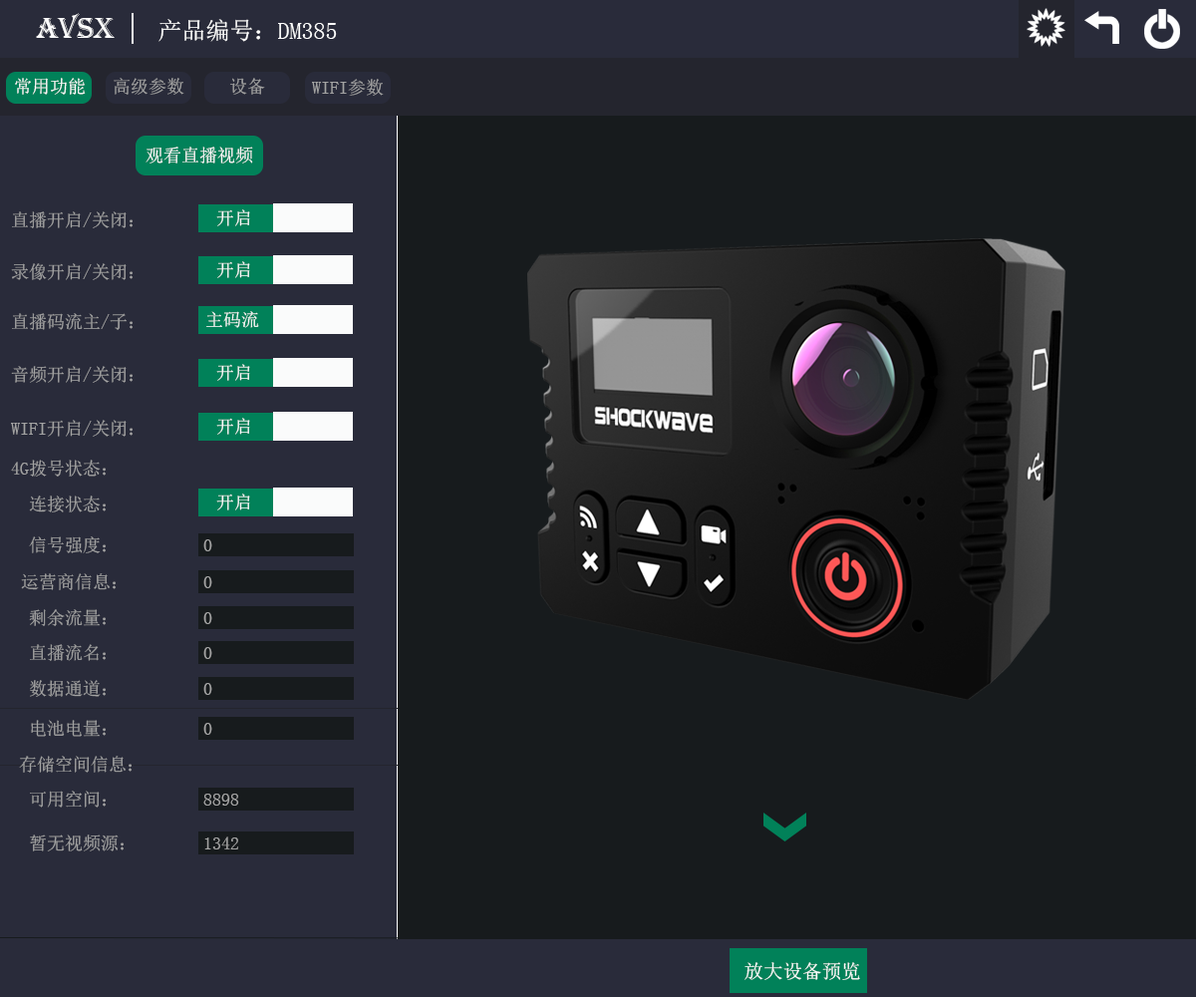
<style>
.page{position:relative;width:1196px;height:997px;background:#171b1d}
.page>*{position:absolute;margin:0}
.t1{font:29.9px "Algerian";color:#fefefe}
.t2{font:23.9px "SimSun";color:#fefefe}
.t3{font:17.9px "SimSun";color:#fffefe}
.t4{font:17.9px "SimSun";color:#a3a3a3}
.t5{font:17.9px "SimSun";color:#fcfafa}
.t6{font:17.9px "SimSun";color:#fafbfb}
.t7{font:19.2px "SimSun";color:#fdfefe}
</style>
<div class="page">
<p class="t1" style="left:36px;top:13px;width:79px;height:25px">AVSX</p>
<p class="t2" style="left:158px;top:19px;width:179px;height:23px">产品编号：DM385</p>
<p class="t3" style="left:15px;top:78px;width:71px;height:17px">常用功能</p>
<p class="t4" style="left:114px;top:78px;width:70px;height:17px">高级参数</p>
<p class="t4" style="left:230px;top:78px;width:35px;height:17px">设备</p>
<p class="t4" style="left:312px;top:79px;width:72px;height:17px">WIFI参数</p>
<p class="t5" style="left:146px;top:147px;width:107px;height:16px">观看直播视频</p>
<p class="t6" style="left:216px;top:209px;width:34px;height:17px">开启</p>
<p class="t4" style="left:12px;top:211px;width:121px;height:17px">直播开启/关闭：</p>
<p class="t4" style="left:11px;top:263px;width:122px;height:17px">录像开启/关闭：</p>
<p class="t6" style="left:216px;top:261px;width:34px;height:17px">开启</p>
<p class="t4" style="left:12px;top:313px;width:121px;height:17px">直播码流主/子：</p>
<p class="t6" style="left:206px;top:311px;width:53px;height:17px">主码流</p>
<p class="t4" style="left:11px;top:366px;width:122px;height:17px">音频开启/关闭：</p>
<p class="t6" style="left:216px;top:364px;width:34px;height:17px">开启</p>
<p class="t4" style="left:11px;top:420px;width:122px;height:17px">WIFI开启/关闭：</p>
<p class="t6" style="left:216px;top:418px;width:34px;height:17px">开启</p>
<p class="t4" style="left:11px;top:460px;width:95px;height:16px">4G拨号状态：</p>
<p class="t4" style="left:29px;top:495px;width:77px;height:17px">连接状态：</p>
<p class="t6" style="left:216px;top:493px;width:34px;height:17px">开启</p>
<p class="t4" style="left:29px;top:536px;width:77px;height:17px">信号强度：</p>
<p class="t4" style="left:203px;top:539px;width:9px;height:12px">0</p>
<p class="t4" style="left:21px;top:573px;width:95px;height:17px">运营商信息：</p>
<p class="t4" style="left:203px;top:576px;width:9px;height:12px">0</p>
<p class="t4" style="left:29px;top:609px;width:77px;height:17px">剩余流量：</p>
<p class="t4" style="left:203px;top:612px;width:9px;height:12px">0</p>
<p class="t4" style="left:30px;top:644px;width:76px;height:17px">直播流名：</p>
<p class="t4" style="left:203px;top:647px;width:9px;height:12px">0</p>
<p class="t4" style="left:30px;top:680px;width:76px;height:17px">数据通道：</p>
<p class="t4" style="left:203px;top:683px;width:9px;height:12px">0</p>
<p class="t4" style="left:31px;top:720px;width:75px;height:17px">电池电量：</p>
<p class="t4" style="left:203px;top:723px;width:9px;height:12px">0</p>
<p class="t4" style="left:19px;top:756px;width:113px;height:17px">存储空间信息：</p>
<p class="t4" style="left:30px;top:790px;width:76px;height:17px">可用空间：</p>
<p class="t4" style="left:203px;top:793px;width:36px;height:12px">8898</p>
<p class="t4" style="left:30px;top:834px;width:94px;height:17px">暂无视频源：</p>
<p class="t4" style="left:204px;top:836px;width:34px;height:13px">1342</p>
<p class="t7" style="left:745px;top:962px;width:115px;height:18px">放大设备预览</p>
</div>
